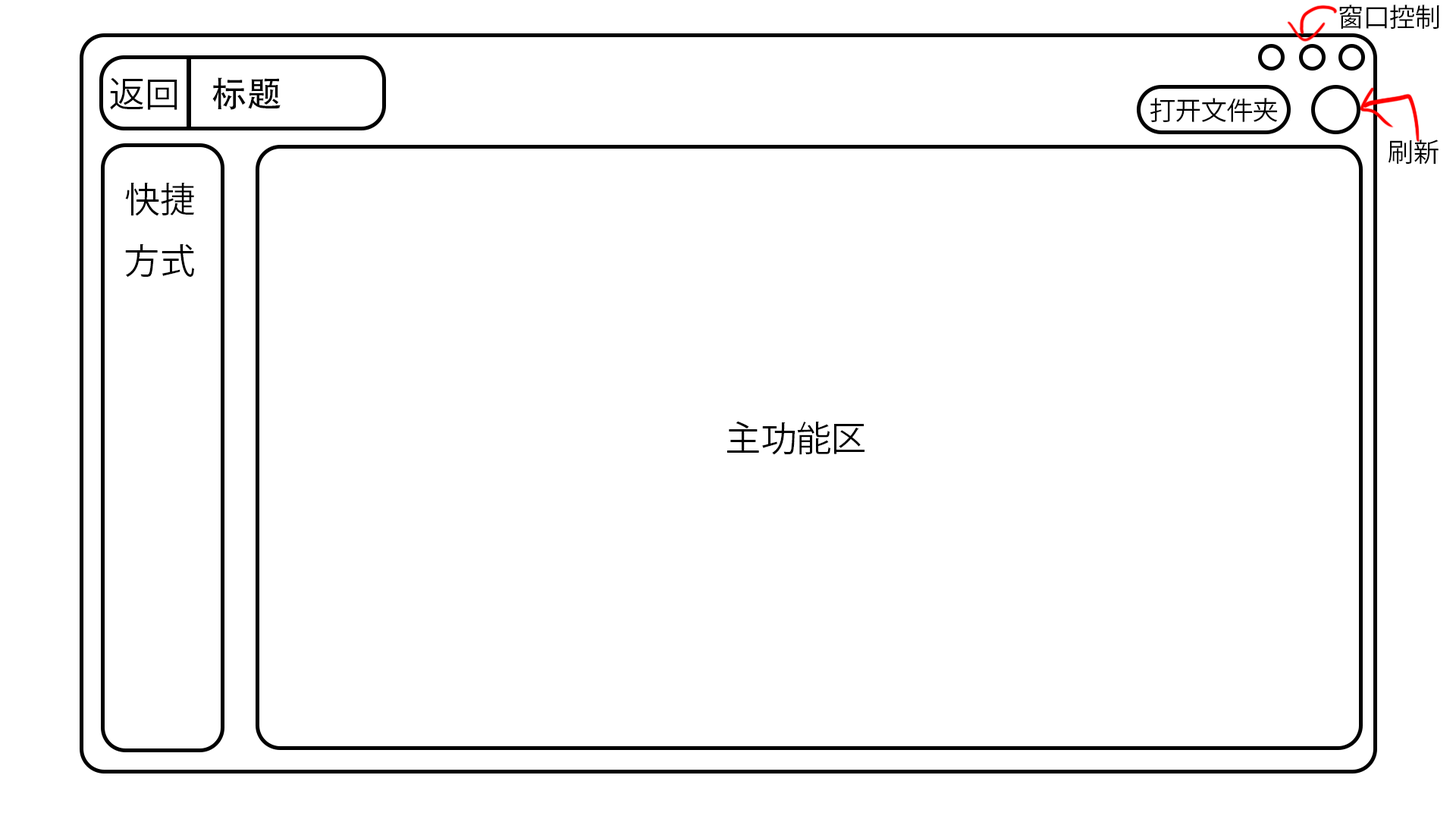
<style>
.page{position:relative;width:1456px;height:819px;background:#ffffff}
.page>*{position:absolute;margin:0}
.t1{font:25.7px "KozGoPr6N-Regular";color:#000000}
.t2{font:35.1px "KozGoPr6N-Regular";color:#000000}
.t3{font:35.1px "AdobeHeitiStd-Regular";color:#000000}
.t4{font:25.8px "KozGoPr6N-Regular";color:#000000}
</style>
<div class="page">
<p class="t1" style="left:1339px;top:5px;width:100px;height:24px">窗口控制</p>
<p class="t2" style="left:110px;top:77px;width:67px;height:33px">返回</p>
<p class="t3" style="left:212px;top:77px;width:69px;height:33px">标题</p>
<p class="t4" style="left:1150px;top:98px;width:128px;height:24px">打开文件夹</p>
<p class="t1" style="left:1388px;top:140px;width:51px;height:25px">刷新</p>
<p class="t2" style="left:125px;top:182px;width:69px;height:96px">快捷<br>方式</p>
<p class="t2" style="left:727px;top:421px;width:137px;height:34px">主功能区</p>
</div>
